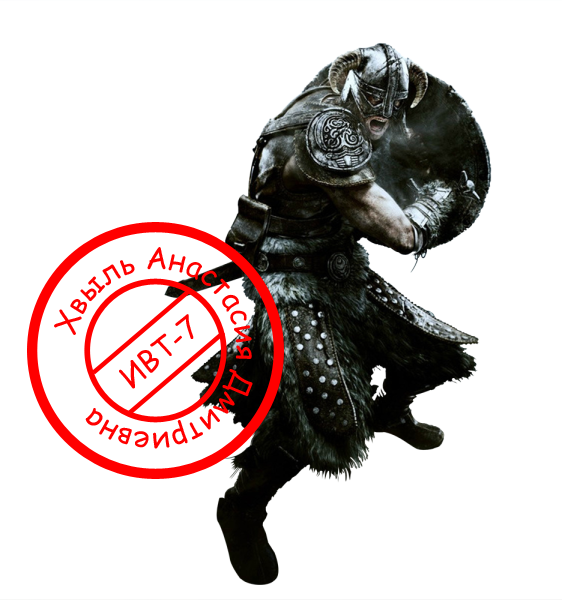
<style>
.page{position:relative;width:562px;height:600px;background:#ffffff}
.page>*{position:absolute;margin:0}
.t1{font:30px "ComicSansMS";color:#ff0000}
</style>
<div class="page">
<p class="t1" style="left:54px;top:247px;width:199px;height:202px;rotate:-116deg">Хвыль Анастасия Дмитриевна</p>
<p class="t1" style="left:119px;top:314px;width:75px;height:75px;rotate:-40deg">ИВТ-7</p>
</div>
